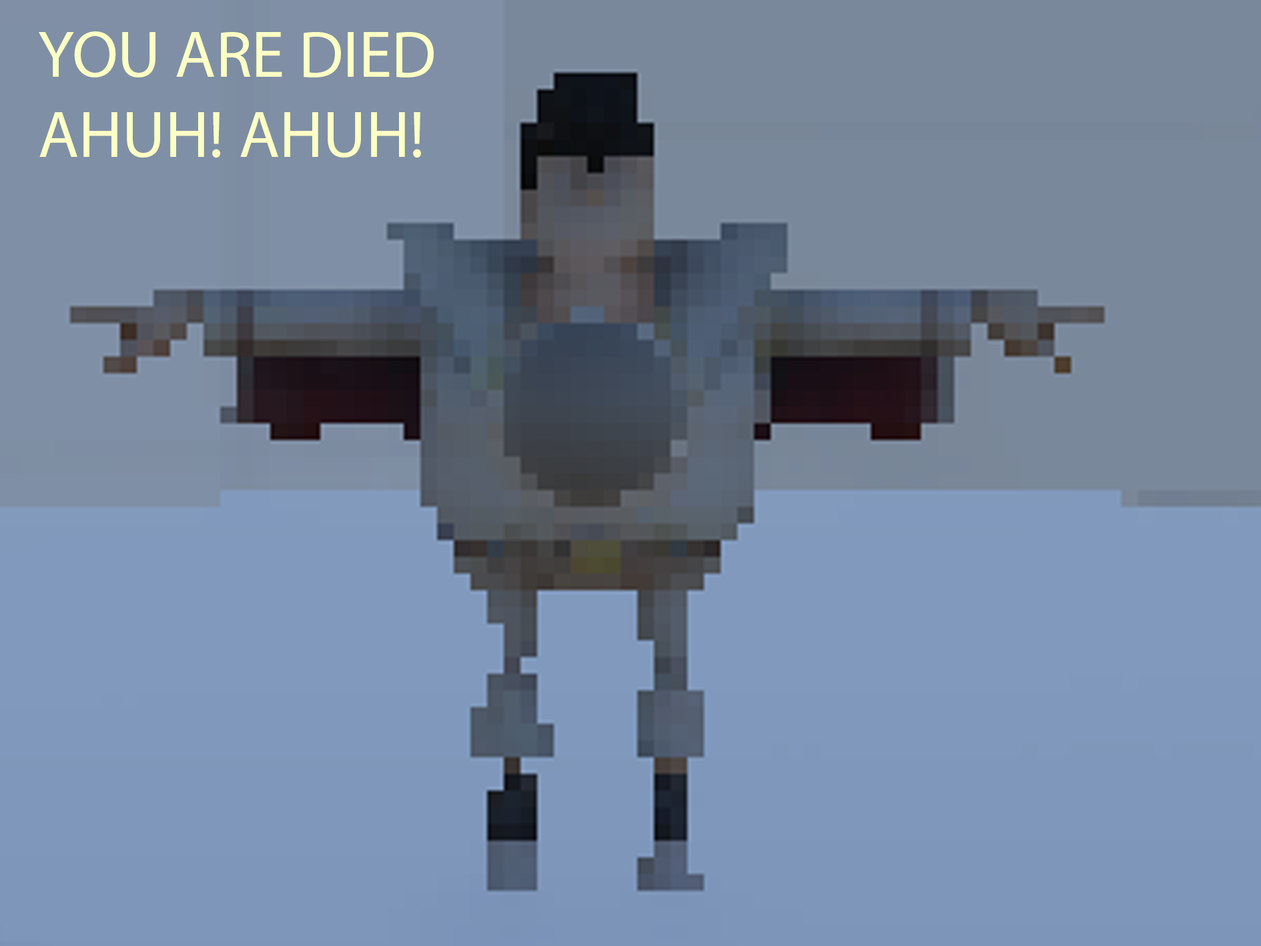
<style>
.page{position:relative;width:1261px;height:946px}
.page>*{position:absolute;margin:0}
.t1{font:66.7px "MyriadPro-Regular";color:#fcffc5}
</style>
<div class="page">
<p class="t1" style="left:39px;top:31px;width:395px;height:126px">YOU ARE DIED<br>AHUH! AHUH!</p>
</div>
